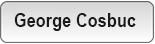
<style>
.page{position:relative;width:155px;height:44px}
.page>*{position:absolute;margin:0}
.t1{font:18.7px "Arial-BoldMT";color:#1a1a1a;scale:0.88 1}
</style>
<div class="page">
<p class="t1" style="left:14px;top:13px;width:122px;height:18px">George Cosbuc</p>
</div>
